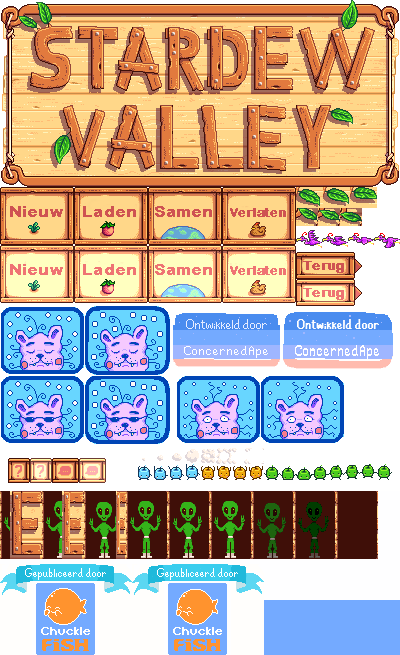
<style>
.page{position:relative;width:400px;height:655px}
.page>*{position:absolute;margin:0}
.t1{font:16px "ArialRoundedMTBold";color:#ce5252;font-weight:bold}
.t2{font:12.6px "ArialRoundedMTBold";color:#ce5252;font-weight:bold}
.t3{font:16px "ArialRoundedMTBold";color:#ef7373;font-weight:bold}
.t4{font:12.6px "ArialRoundedMTBold";color:#ef7373;font-weight:bold}
.t5{font:13px "ArialRoundedMTBold";color:#ce5252;font-weight:bold;scale:1.03 1}
.t6{font:13px "ArialRoundedMTBold";color:#ef7373;font-weight:bold;scale:1.03 1}
.t7{font:14px "SVThin";color:#e6ecff}
.t8{font:12px "SVThin";color:#fefeff}
</style>
<div class="page">
<p class="t1" style="left:10px;top:206px;width:53px;height:11px">Nieuw</p>
<p class="t1" style="left:83px;top:206px;width:53px;height:11px">Laden</p>
<p class="t1" style="left:155px;top:206px;width:57px;height:11px">Samen</p>
<p class="t2" style="left:230px;top:208px;width:56px;height:9px">Verlaten</p>
<p class="t3" style="left:10px;top:264px;width:53px;height:11px">Nieuw</p>
<p class="t3" style="left:83px;top:264px;width:53px;height:11px">Laden</p>
<p class="t3" style="left:155px;top:264px;width:57px;height:11px">Samen</p>
<p class="t4" style="left:230px;top:266px;width:56px;height:9px">Verlaten</p>
<p class="t5" style="left:303px;top:261px;width:41px;height:12px">Terug</p>
<p class="t6" style="left:303px;top:288px;width:41px;height:12px">Terug</p>
<p class="t7" style="left:186px;top:319px;width:81px;height:10px">Ontwikkeld door</p>
<p class="t8" style="left:25px;top:568px;width:81px;height:12px">Gepubliceerd door</p>
<p class="t8" style="left:157px;top:568px;width:81px;height:12px">Gepubliceerd door</p>
</div>
